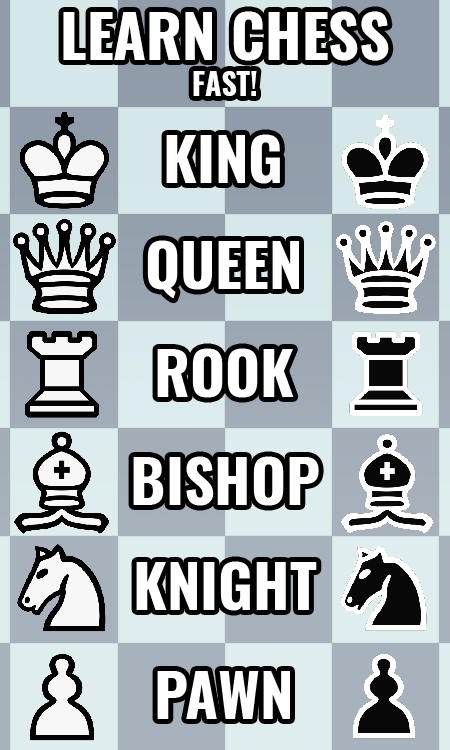
<style>
.page{position:relative;width:450px;height:750px}
.page>*{position:absolute;margin:0}
.t1{font:60px "Oswald-Bold";color:#ffffff}
.t2{font:30px "Oswald-Bold";color:#ffffff}
</style>
<div class="page">
<p class="t1" style="left:63px;top:11px;width:326px;height:85px;text-align:center">LEARN CHESS <br><span class="t2">FAST!</span></p>
<p class="t1" style="left:166px;top:134px;width:114px;height:50px">KING</p>
<p class="t1" style="left:147px;top:240px;width:152px;height:59px">QUEEN</p>
<p class="t1" style="left:157px;top:348px;width:137px;height:50px">ROOK</p>
<p class="t1" style="left:133px;top:456px;width:186px;height:50px">BISHOP</p>
<p class="t1" style="left:136px;top:561px;width:181px;height:50px">KNIGHT</p>
<p class="t1" style="left:157px;top:671px;width:133px;height:48px">PAWN</p>
</div>
